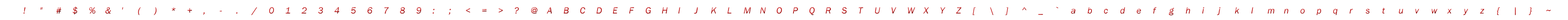
<style>
.page{position:relative;width:1568px;height:20px;background:#ffffff}
.page>*{position:absolute;margin:0}
.t1{font:9.1px "FranklinGothic-BookItalic"}
</style>
<div class="page">
<p class="t1" style="left:23px;top:6px;width:1528px;height:9px">! " # $ % &amp; ' ( ) * + , - . / 0 1 2 3 4 5 6 7 8 9 : ; &lt; = &gt; ? @ A B C D E F G H I J K L M N O P Q R S T U V W X Y Z [ \ ] ^ _ ` a b c d e f g h i j k l m n o p q r s t u v w x y z { | } ~</p>
</div>
